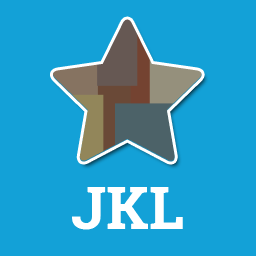
<style>
.page{position:relative;width:256px;height:256px;background:#13a1d7}
.page>*{position:absolute;margin:0}
.t1{font:60px "RobotoSlab-Bold";color:#ffffff;text-transform:uppercase}
</style>
<div class="page">
<p class="t1" style="left:72px;top:187px;width:111px;height:43px">jkl</p>
</div>
